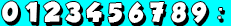
<style>
.page{position:relative;width:231px;height:26px;background:#00ffff}
.page>*{position:absolute;margin:0}
.t1{font:23.7px "GROBOLD";color:#ffffff}
</style>
<div class="page">
<p class="t1" style="left:2px;top:1px;width:16px;height:21px">0</p>
<p class="t1" style="left:25px;top:2px;width:12px;height:20px">1</p>
<p class="t1" style="left:43px;top:1px;width:18px;height:21px">2</p>
<p class="t1" style="left:65px;top:2px;width:16px;height:21px">3</p>
<p class="t1" style="left:86px;top:2px;width:16px;height:20px">4</p>
<p class="t1" style="left:108px;top:3px;width:14px;height:20px">5</p>
<p class="t1" style="left:128px;top:2px;width:16px;height:21px">6</p>
<p class="t1" style="left:150px;top:2px;width:14px;height:20px">7</p>
<p class="t1" style="left:171px;top:2px;width:15px;height:21px">8</p>
<p class="t1" style="left:191px;top:2px;width:16px;height:21px">9</p>
<p class="t1" style="left:218px;top:8px;width:5px;height:11px">:</p>
</div>
